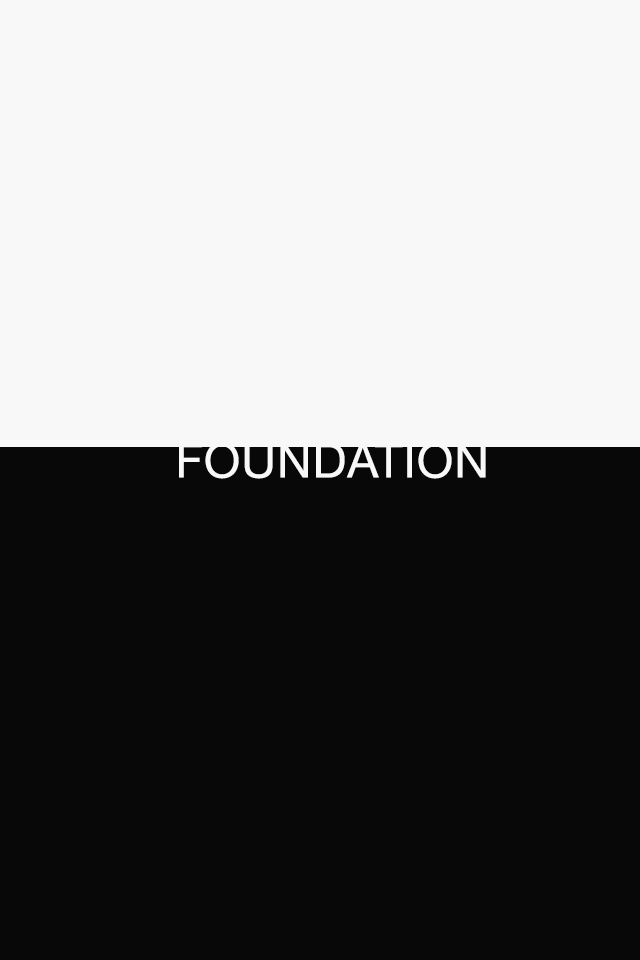
<style>
.page{position:relative;width:640px;height:960px;background:#080808}
.page>*{position:absolute;margin:0}
.t1{font:48px "HelveticaNeue";letter-spacing:0.02em;color:#f8f8f8}
</style>
<div class="page">
<p class="t1" style="left:179px;top:442px;width:307px;height:37px">FOUNDATION</p>
</div>
